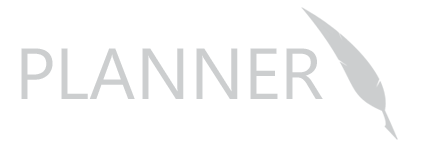
<style>
.page{position:relative;width:428px;height:147px;background:#ffffff}
.page>*{position:absolute;margin:0}
.t1{font:72px "MicrosoftNewTaiLue";color:#cccecf}
</style>
<div class="page">
<p class="t1" style="left:21px;top:48px;width:302px;height:51px">PLANNER</p>
</div>
